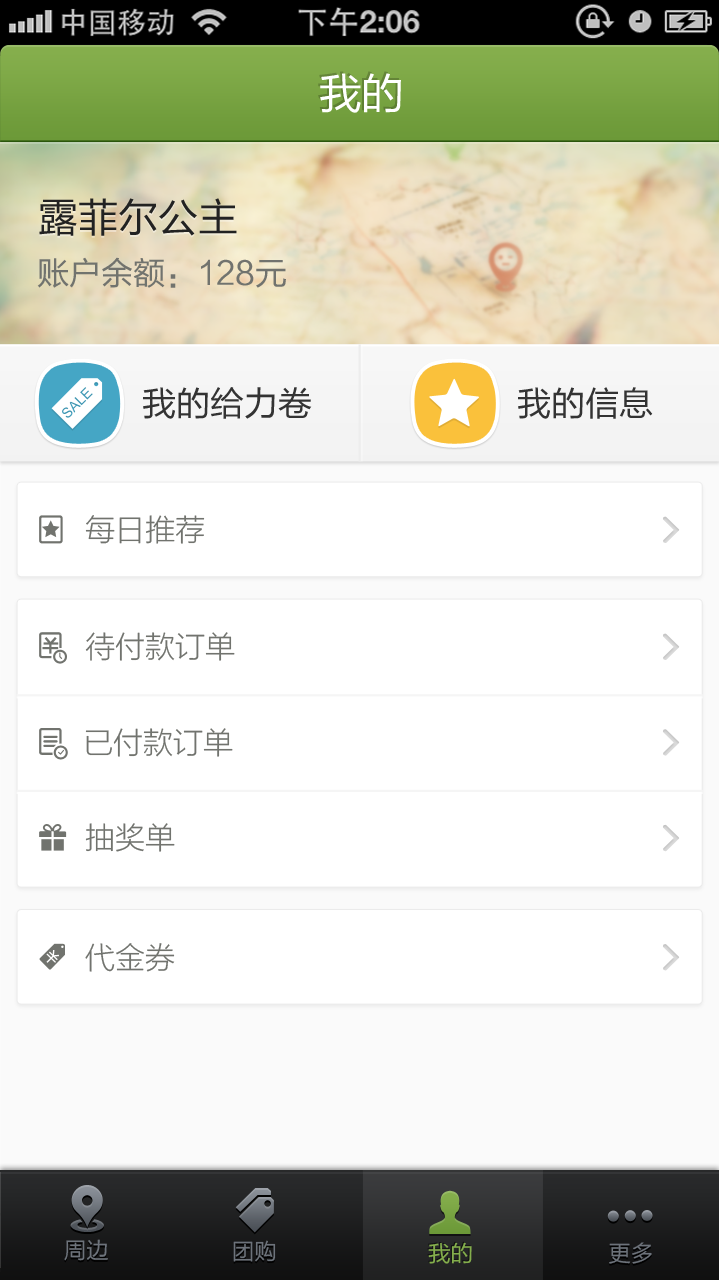
<style>
.page{position:relative;width:719px;height:1280px;background:#ffffff}
.page>*{position:absolute;margin:0}
.t1{font:42.7px "FZLTHJW--GB1-0";color:#ffffff}
.t2{font:40px "FZLTHJW--GB1-0";color:#222222}
.t3{font:32px "FZLTHJW--GB1-0";color:#71736e}
.t4{font:34px "FZLTHJW--GB1-0";color:#333333}
.t5{font:30px "FZLTXHJW--GB1-0";color:#71736e}
.t6{font:22.5px "FZLTHJW--GB1-0";color:#6d737b}
.t7{font:22.5px "FZLTHJW--GB1-0";color:#84ae4c}
</style>
<div class="page">
<p class="t1" style="left:320px;top:73px;width:81px;height:40px">我的</p>
<p class="t2" style="left:39px;top:198px;width:198px;height:38px">露菲尔公主</p>
<p class="t3" style="left:37px;top:257px;width:249px;height:31px">账户余额：128元</p>
<p class="t4" style="left:143px;top:387px;width:169px;height:32px">我的给力卷</p>
<p class="t4" style="left:518px;top:387px;width:135px;height:32px">我的信息</p>
<p class="t5" style="left:85px;top:515px;width:120px;height:29px">每日推荐</p>
<p class="t5" style="left:85px;top:632px;width:150px;height:29px">待付款订单</p>
<p class="t5" style="left:85px;top:728px;width:148px;height:29px">已付款订单</p>
<p class="t5" style="left:85px;top:823px;width:90px;height:29px">抽奖单</p>
<p class="t5" style="left:85px;top:943px;width:90px;height:29px">代金券</p>
<p class="t6" style="left:64px;top:1239px;width:44px;height:22px">周边</p>
<p class="t6" style="left:233px;top:1240px;width:43px;height:22px">团购</p>
<p class="t7" style="left:428px;top:1242px;width:44px;height:22px">我的</p>
<p class="t6" style="left:609px;top:1242px;width:43px;height:22px">更多</p>
</div>
